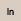
<style>
.page{position:relative;width:21px;height:21px;background:#d9cdc1}
.page>*{position:absolute;margin:0}
.t1{font:9px "Tahoma";color:#000000}
</style>
<div class="page">
<p class="t1" style="left:7px;top:8px;width:7px;height:7px">ln</p>
</div>
